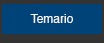
<style>
.page{position:relative;width:104px;height:43px;background:#004379}
.page>*{position:absolute;margin:0}
.t1{font:12px "Helvetica";color:#f2f5f8}
</style>
<div class="page">
<p class="t1" style="left:30px;top:14px;width:43px;height:9px">Temario</p>
</div>
